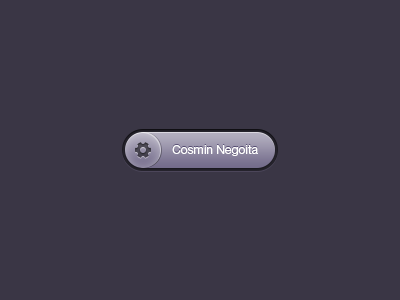
<style>
.page{position:relative;width:400px;height:300px;background:#3a3645}
.page>*{position:absolute;margin:0}
.t1{font:12px "HelveticaNeueLTStd-Roman";color:#ffffff}
</style>
<div class="page">
<p class="t1" style="left:172px;top:145px;width:86px;height:11px">Cosmin Negoita</p>
</div>
